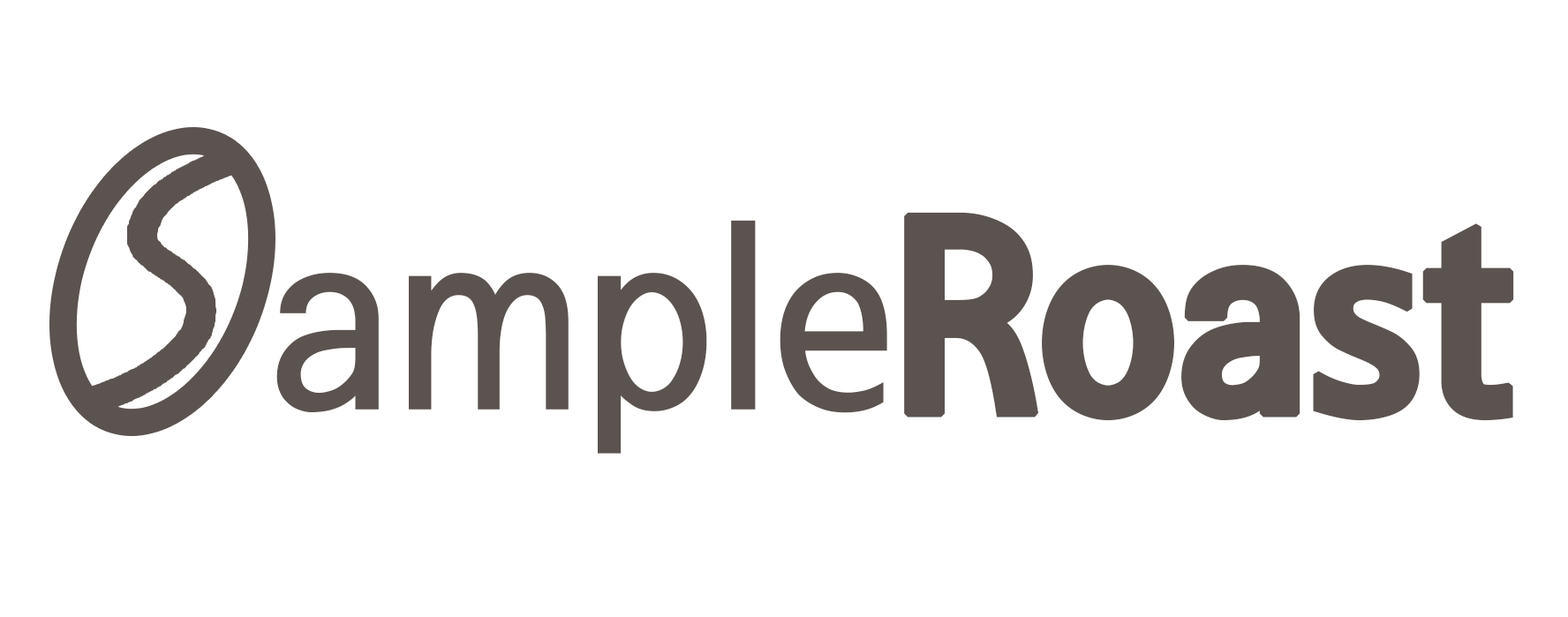
<style>
.page{position:relative;width:1568px;height:617px;background:#ffffff}
.page>*{position:absolute;margin:0}
.t1{font:264.9px "SeN-CB";color:#5b534f}
.t2{font:264.9px "SeN-CBL";color:#5b534f;font-weight:bold}
</style>
<div class="page">
<p class="t1" style="left:276px;top:212px;width:1238px;height:242px">ample<span class="t2">Roast</span></p>
</div>
